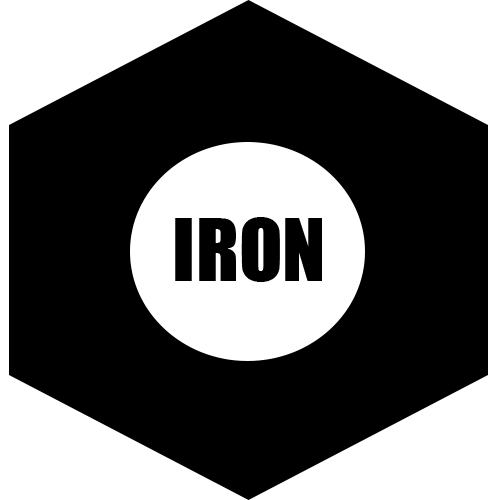
<style>
.page{position:relative;width:500px;height:500px;background:#000000}
.page>*{position:absolute;margin:0}
.t1{font:80px "Impact";color:#000000}
</style>
<div class="page">
<p class="t1" style="left:175px;top:217px;width:147px;height:65px">IRON</p>
</div>
